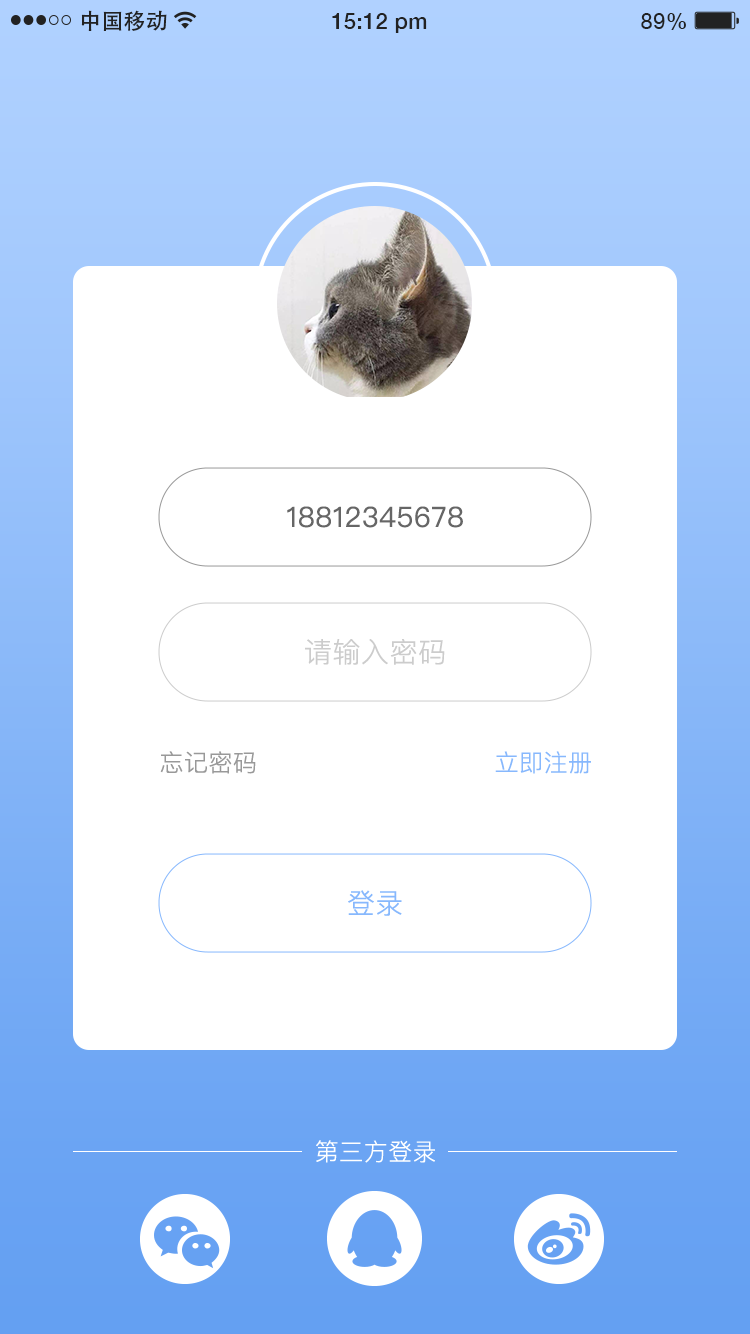
<style>
.page{position:relative;width:750px;height:1334px;background:#ffffff}
.page>*{position:absolute;margin:0}
.t1{font:21.8px "AdobeHeitiStd-Regular";letter-spacing:0.02em;color:#222222}
.t2{font:21.8px "HelveticaNeue-Medium";letter-spacing:0.02em;color:#222222}
.t3{font:21.8px "HelveticaNeue";letter-spacing:0.02em;color:#222222}
.t4{font:28px "PingFangSC-Regular";letter-spacing:0.02em;color:#666666}
.t5{font:28px "PingFang-SC-Regular";letter-spacing:0.02em;color:#cccccc}
.t6{font:24px "PingFang-SC-Regular";letter-spacing:0.02em;color:#999999}
.t7{font:24px "PingFang-SC-Regular";letter-spacing:0.02em;color:#87b8fd}
.t8{font:28px "PingFang-SC-Regular";letter-spacing:0.02em;color:#87b8fd}
.t9{font:24px "PingFang-SC-Regular";letter-spacing:0.02em;color:#ffffff}
</style>
<div class="page">
<p class="t1" style="left:81px;top:10px;width:86px;height:21px">中国移动</p>
<p class="t2" style="left:332px;top:13px;width:95px;height:20px">15:12 pm</p>
<p class="t3" style="left:641px;top:13px;width:45px;height:17px">89<span class="t2">%</span></p>
<p class="t4" style="left:287px;top:506px;width:176px;height:22px">18812345678</p>
<p class="t5" style="left:305px;top:639px;width:140px;height:26px">请输入密码</p>
<p class="t6" style="left:160px;top:751px;width:431px;height:23px">忘记密码                            <span class="t7">立即注册</span></p>
<p class="t8" style="left:348px;top:890px;width:54px;height:26px">登录</p>
<p class="t9" style="left:316px;top:1140px;width:119px;height:23px">第三方登录</p>
</div>
